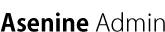
<style>
.page{position:relative;width:165px;height:32px;background:#ffffff}
.page>*{position:absolute;margin:0}
.t1{font:24px "KozGoPr6N-Bold";color:#000000}
.t2{font:24px "KozGoPr6N-Light";color:#000000}
</style>
<div class="page">
<p class="t1" style="left:0px;top:12px;width:165px;height:20px">Asenine<span class="t2"> Admin</span></p>
</div>
